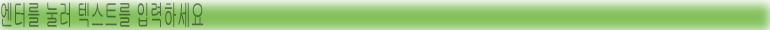
<style>
.page{position:relative;width:770px;height:30px}
.page>*{position:absolute;margin:0}
.t1{font:29.7px "Gulim";color:#506e3c;scale:0.46 1}
</style>
<div class="page">
<p class="t1" style="left:1px;top:2px;width:203px;height:26px">엔터를 눌러 텍스트를 입력하세요</p>
</div>
